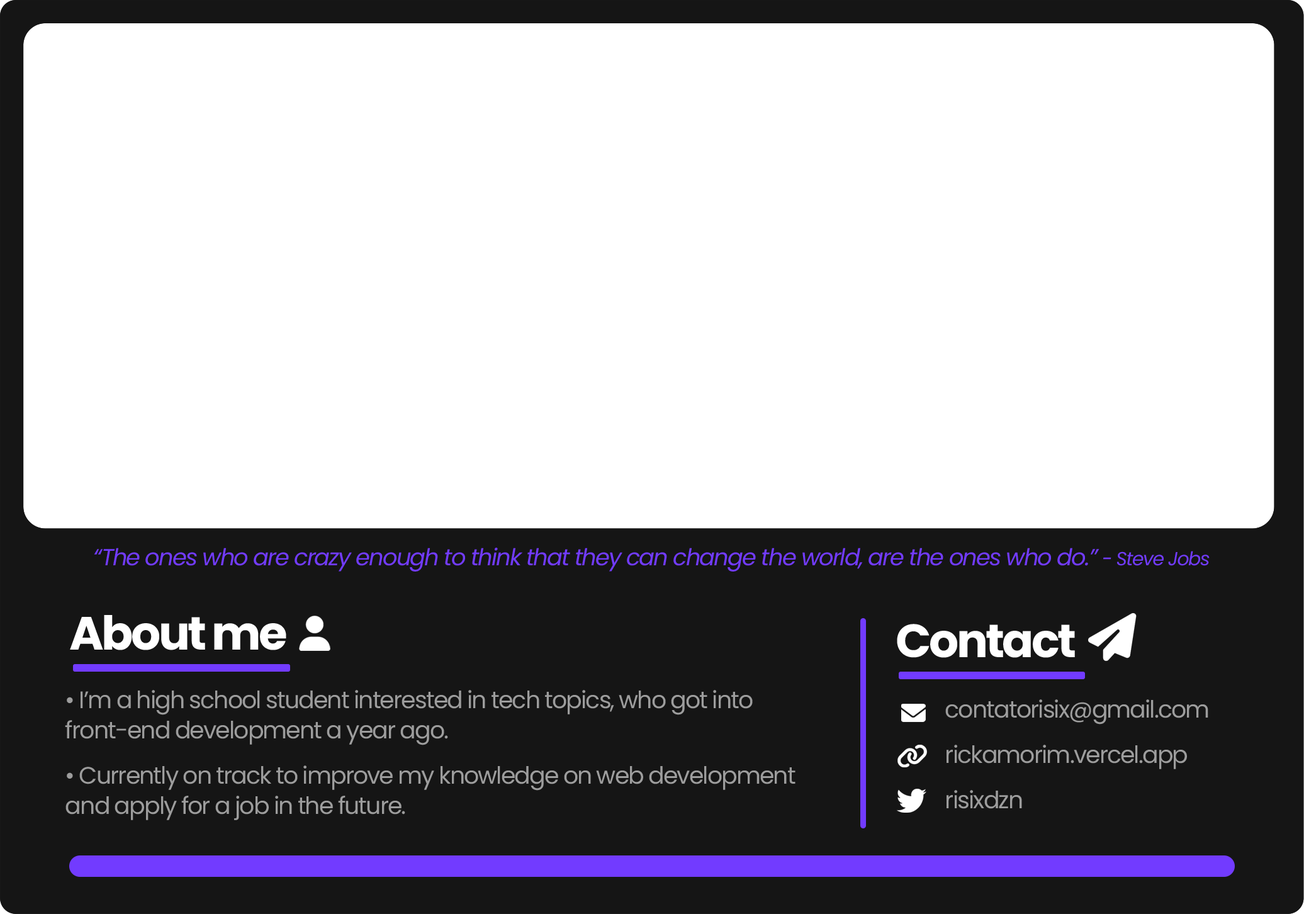
<style>
.page{position:relative;width:1304px;height:914px;background:#ffffff}
.page>*{position:absolute;margin:0}
.t1{font:23.2px "Poppins-Italic";letter-spacing:-0.05em;color:#723bff}
.t2{font:18.9px "Poppins-Italic";letter-spacing:-0.05em;color:#723bff}
.t3{font:46.7px "Poppins-Bold";letter-spacing:-0.05em;color:#ffffff}
.t4{font:23.8px/30.2px "Poppins-Regular";letter-spacing:-0.05em;color:#9d9d9d}
.t5{font:23.8px/15.1px "Poppins-Regular";letter-spacing:-0.05em;color:#9d9d9d}
.t6{font:23.8px/45.3px "Poppins-Regular";letter-spacing:-0.05em;color:#9d9d9d}
</style>
<div class="page">
<p class="t1" style="left:94px;top:548px;width:1116px;height:24px">“The ones who are crazy enough to think that they can change the world, are the ones who do.” <span class="t2">- Steve Jobs</span></p>
<p class="t3" style="left:70px;top:615px;width:216px;height:35px">About me</p>
<p class="t3" style="left:897px;top:624px;width:178px;height:34px">Contact</p>
<p class="t4" style="left:65px;top:690px;width:731px;height:130px">• I’m a high school student interested in tech topics, who got into <br>front-end development a year ago.<br><br><span class="t5">• Currently on track to improve my knowledge on web development <br></span>and apply for a job in the future.</p>
<p class="t6" style="left:946px;top:699px;width:263px;height:110px">contatorisix@gmail.com<br>rickamorim.vercel.app<br>risixdzn</p>
</div>
